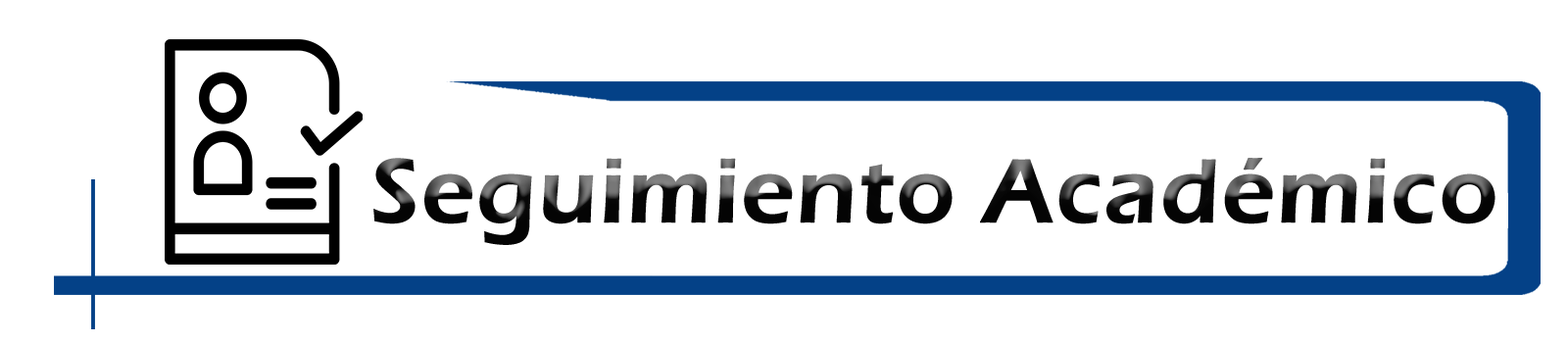
<style>
.page{position:relative;width:1568px;height:343px;background:#ffffff}
.page>*{position:absolute;margin:0}
.t1{font:93.9px "ErasITC-Demi";color:#080808;font-weight:bold}
</style>
<div class="page">
<p class="t1" style="left:373px;top:158px;width:1122px;height:87px">Seguimiento Académico</p>
</div>
